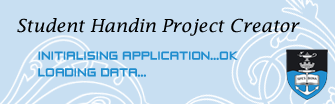
<style>
.page{position:relative;width:335px;height:104px;background:#c8dff2}
.page>*{position:absolute;margin:0}
.t1{font:18px "LucidaFax-Italic";color:#000000}
.t2{font:14px "ZeroTwos";color:#208dce}
</style>
<div class="page">
<p class="t1" style="left:17px;top:18px;width:283px;height:18px">Student Handin Project Creator</p>
<p class="t2" style="left:38px;top:51px;width:200px;height:26px">INITIALISING APPLICATION...OK<br>LOADING DATA...</p>
</div>
